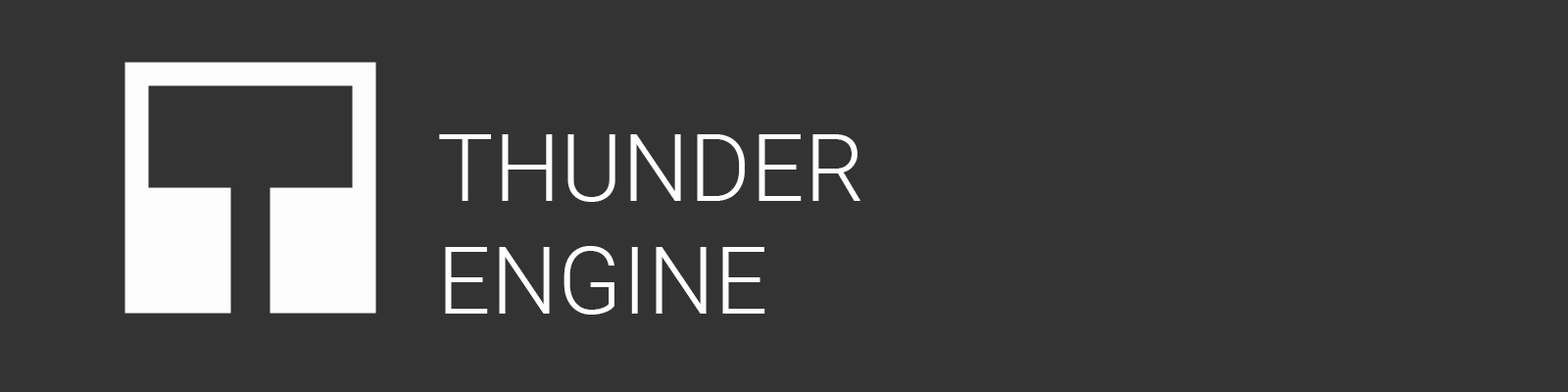
<style>
.page{position:relative;width:1568px;height:392px;background:#333333}
.page>*{position:absolute;margin:0}
.t1{font:94.1px "Roboto-Light";letter-spacing:0.002em;color:#ffffff}
</style>
<div class="page">
<p class="t1" style="left:439px;top:134px;width:421px;height:181px">THUNDER<br>ENGINE</p>
</div>
